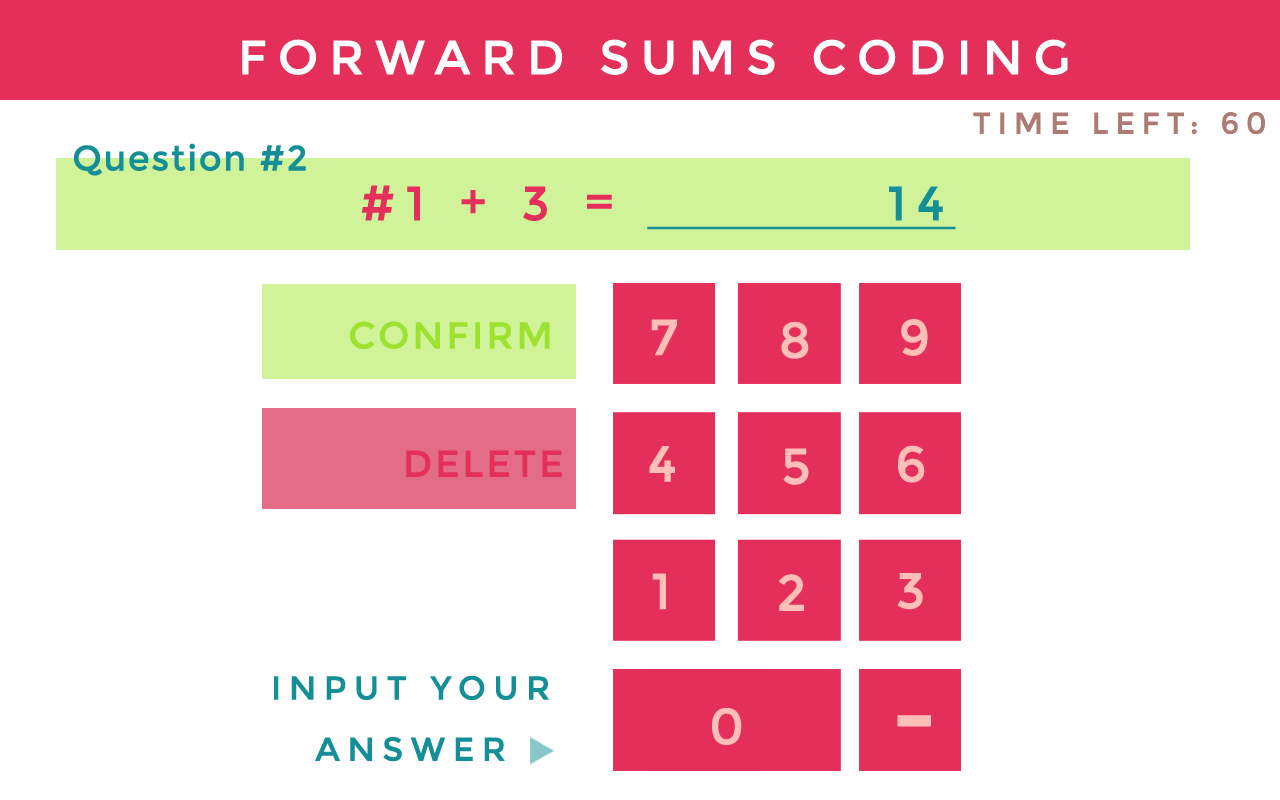
<style>
.page{position:relative;width:1280px;height:800px;background:#ffffff}
.page>*{position:absolute;margin:0}
.t1{font:48px "Montserrat-Regular";letter-spacing:0.2em;color:#ffffff;text-transform:uppercase;font-weight:bold}
.t2{font:30px "Montserrat-Regular";letter-spacing:0.2em;color:#ad7a74;text-transform:uppercase;font-weight:bold}
.t3{font:35px "Montserrat-Regular";letter-spacing:0.025em;color:#148f97;font-weight:bold}
.t4{font:48px "Montserrat-Regular";letter-spacing:0.2em;color:#e42f5a;font-weight:bold}
.t5{font:48px "Montserrat-Regular";letter-spacing:0.2em;color:#148f97;font-weight:bold;text-decoration:underline}
.t6{font:37.3px "Montserrat-Regular";letter-spacing:0.05em;color:#9de22f;text-transform:uppercase;font-weight:bold}
.t7{font:50.3px "Montserrat-Regular";letter-spacing:0.2em;color:#ffbfb8;text-transform:uppercase;font-weight:bold}
.t8{font:37.3px "Montserrat-Regular";letter-spacing:0.05em;color:#e42f5a;text-transform:uppercase;font-weight:bold}
.t9{font:33px/61.2px "Montserrat-Regular";letter-spacing:0.2em;color:#148f97;text-transform:uppercase;font-weight:bold}
.t10{font:97.3px "Montserrat-Regular";letter-spacing:0.2em;color:#ffbfb8;text-transform:uppercase;font-weight:bold}
</style>
<div class="page">
<p class="t1" style="left:242px;top:39px;width:826px;height:36px">Forward Sums Coding</p>
<p class="t2" style="left:973px;top:112px;width:292px;height:23px">Time Left: 60</p>
<p class="t3" style="left:74px;top:143px;width:232px;height:33px">Question #2</p>
<p class="t4" style="left:361px;top:185px;width:251px;height:36px">#1 + 3 =</p>
<p class="t5" style="left:647px;top:186px;width:309px;height:44px">14</p>
<p class="t6" style="left:350px;top:321px;width:200px;height:28px">Confirm</p>
<p class="t7" style="left:651px;top:319px;width:26px;height:37px">7</p>
<p class="t7" style="left:781px;top:321px;width:28px;height:38px">8</p>
<p class="t7" style="left:901px;top:319px;width:27px;height:37px">9</p>
<p class="t7" style="left:649px;top:446px;width:26px;height:36px">4</p>
<p class="t7" style="left:783px;top:448px;width:26px;height:37px">5</p>
<p class="t7" style="left:898px;top:445px;width:27px;height:38px">6</p>
<p class="t8" style="left:406px;top:450px;width:156px;height:27px">Delete</p>
<p class="t7" style="left:652px;top:573px;width:14px;height:37px">1</p>
<p class="t7" style="left:779px;top:574px;width:25px;height:37px">2</p>
<p class="t7" style="left:897px;top:573px;width:26px;height:37px">3</p>
<p class="t9" style="left:274px;top:675px;width:275px;height:87px;text-align:center">Input youR<br>Answer</p>
<p class="t7" style="left:712px;top:708px;width:30px;height:37px">0</p>
<p class="t10" style="left:897px;top:715px;width:34px;height:12px">-</p>
</div>
